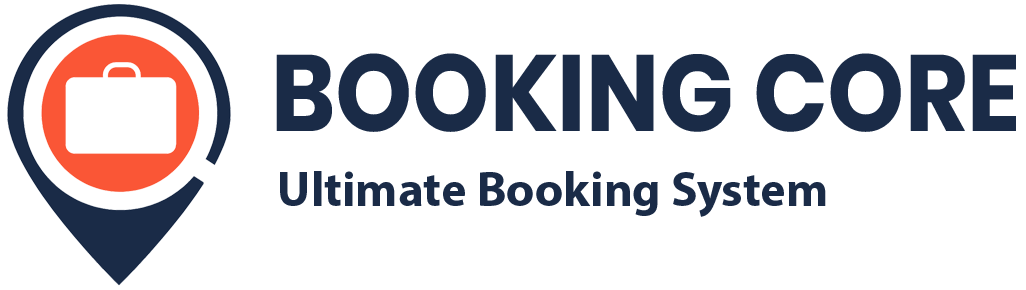
<style>
.page{position:relative;width:1026px;height:290px;background:#ffffff}
.page>*{position:absolute;margin:0}
.t1{font:107.8px "Poppins-Bold";color:#1a2b47;text-transform:uppercase;scale:0.91 1}
.t2{font:49px "MyriadPro-Bold";color:#1a2b47}
</style>
<div class="page">
<p class="t1" style="left:276px;top:53px;width:740px;height:79px">Booking Core</p>
<p class="t2" style="left:280px;top:171px;width:546px;height:46px">Ultimate Booking System</p>
</div>
